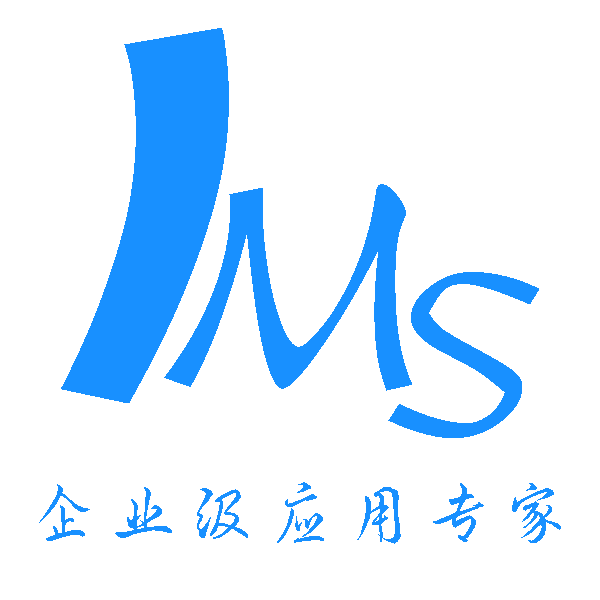
<style>
.page{position:relative;width:600px;height:600px;background:#ffffff}
.page>*{position:absolute;margin:0}
.t1{font:66.7px "yizhiqingshu";letter-spacing:0.18em;color:#1890ff}
</style>
<div class="page">
<p class="t1" style="left:39px;top:482px;width:522px;height:62px">企业级应用专家</p>
</div>
